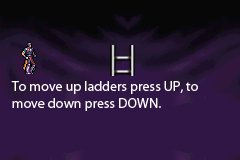
<style>
.page{position:relative;width:240px;height:160px;background:#301644}
.page>*{position:absolute;margin:0}
.t1{font:14px "MyriadPro-Regular";color:#fefcfc}
</style>
<div class="page">
<p class="t1" style="left:11px;top:81px;width:187px;height:30px">To move up ladders press UP, to move down press DOWN.</p>
</div>
